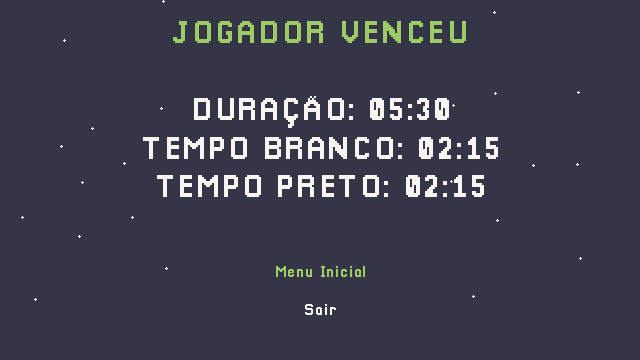
<style>
.page{position:relative;width:640px;height:360px;background:#343647}
.page>*{position:absolute;margin:0}
.t1{font:32px "Pixellari";letter-spacing:0.05em;color:#faf5f0}
.t2{font:32px "Pixellari";letter-spacing:0.05em;color:#9dcc66}
.t3{font:16px "Pixellari";letter-spacing:0.05em;color:#9dcc66}
.t4{font:16px "Pixellari";letter-spacing:0.05em;color:#faf5f0}
</style>
<div class="page">
<p class="t1" style="left:143px;top:21px;width:355px;height:176px;text-align:center"><span class="t2">JOGADOR VENCEU<br></span><br>DURAÇÃO: 05:30<br>TEMPO BRANCO: 02:15<br>TEMPO PRETO: 02:15</p>
<p class="t3" style="left:276px;top:266px;width:89px;height:49px;text-align:center">Menu Inicial<br><span class="t4"><br>Sair</span></p>
</div>
